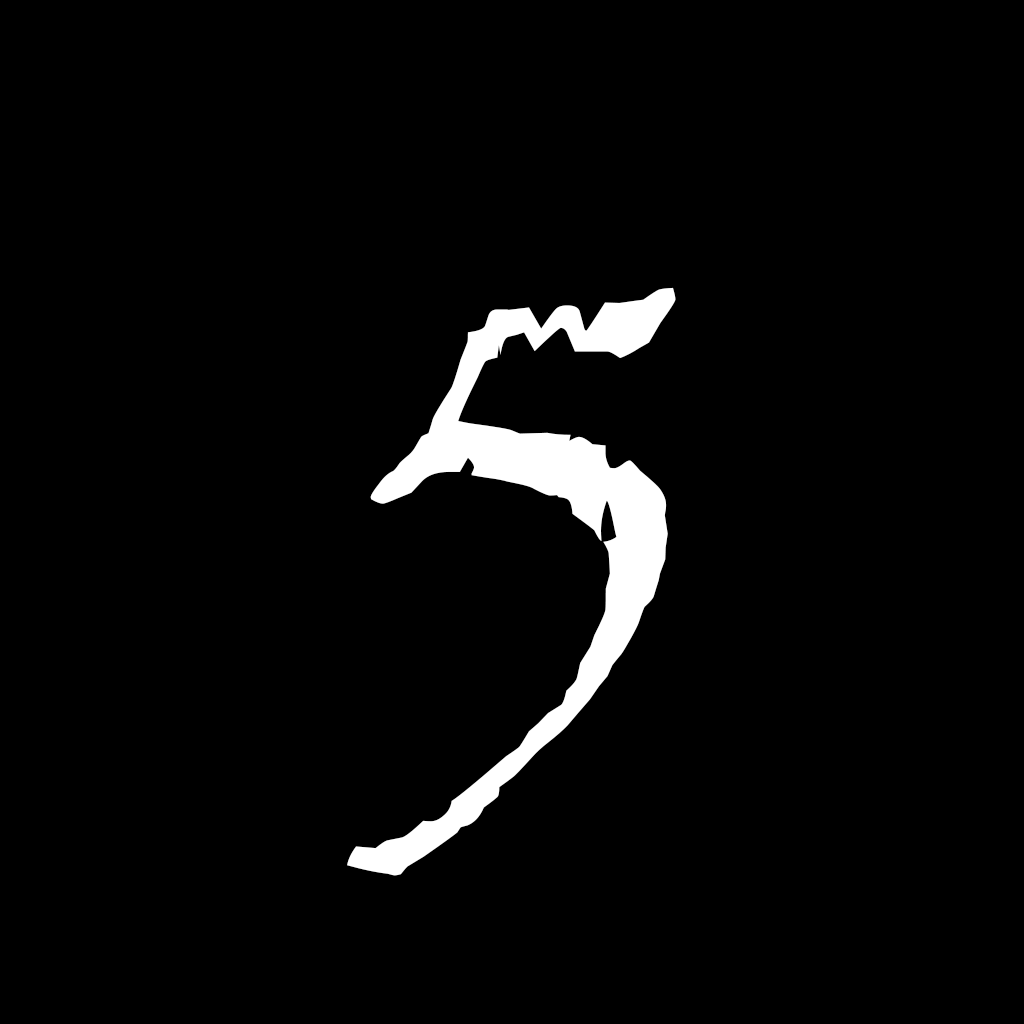
<style>
.page{position:relative;width:1024px;height:1024px;background:#000000}
.page>*{position:absolute;margin:0}
.t1{font:833.3px "Papyrus-Regular";color:#ffffff}
</style>
<div class="page">
<p class="t1" style="left:347px;top:287px;width:329px;height:589px">5</p>
</div>
